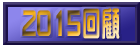
<style>
.page{position:relative;width:140px;height:45px}
.page>*{position:absolute;margin:0}
.t1{font:36px "JetLink-MediumRoundArt";scale:0.54 1}
</style>
<div class="page">
<p class="t1" style="left:22px;top:8px;width:98px;height:31px">2015回顧</p>
</div>
